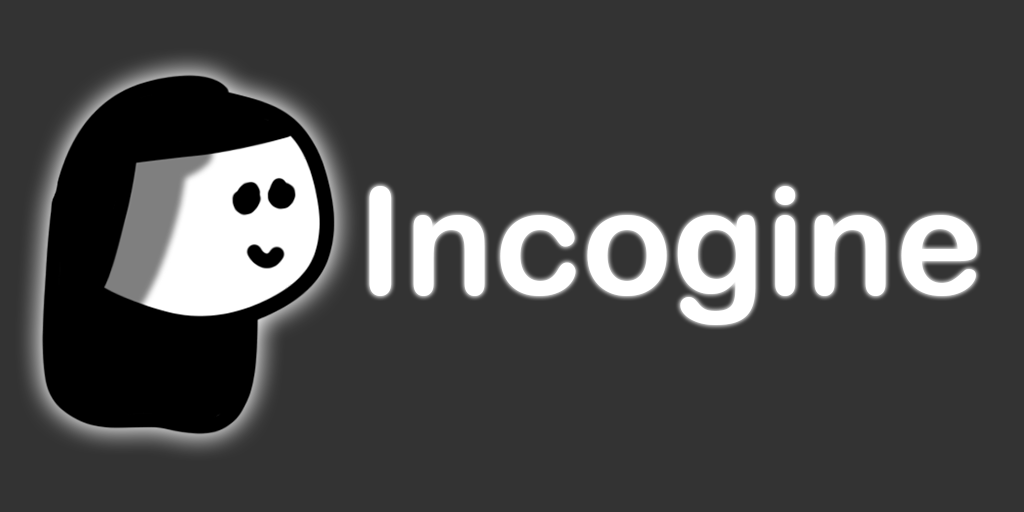
<style>
.page{position:relative;width:1024px;height:512px;background:#333333}
.page>*{position:absolute;margin:0}
.t1{font:148.7px "ArialRoundedMTBold";color:#ffffff}
</style>
<div class="page">
<p class="t1" style="left:369px;top:186px;width:609px;height:139px">Incogine</p>
</div>
